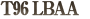
<style>
.page{position:relative;width:90px;height:19px;background:#ffffff}
.page>*{position:absolute;margin:0}
.t1{font:18px "RyuminPro-ExBold";letter-spacing:-0.08em;color:#4a3f32;font-weight:bold;scale:0.9 1}
</style>
<div class="page">
<p class="t1" style="left:0px;top:1px;width:79px;height:15px">T96 LBAA</p>
</div>
